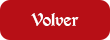
<style>
.page{position:relative;width:110px;height:40px;background:#b70f16}
.page>*{position:absolute;margin:0}
.t1{font:13px "BerryRotunda-Regular";color:#ffffff}
</style>
<div class="page">
<p class="t1" style="left:31px;top:13px;width:48px;height:13px">Volver</p>
</div>
